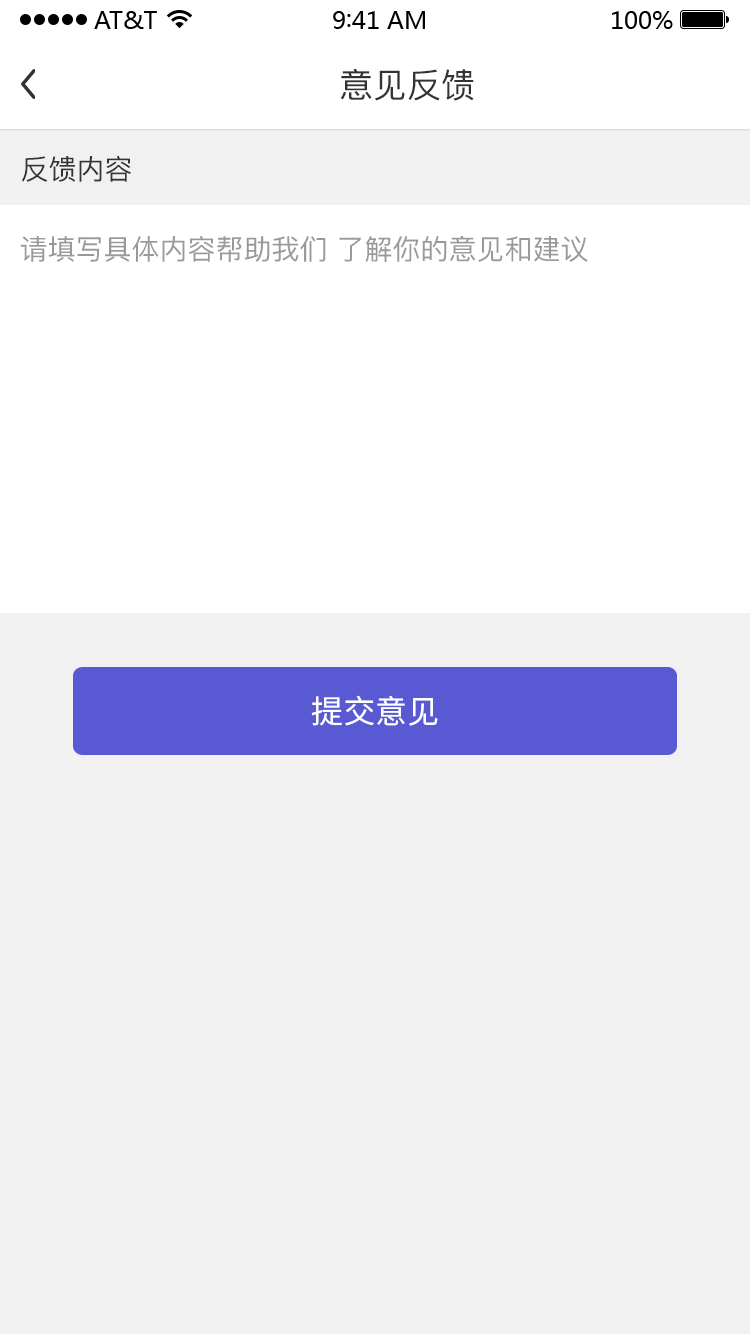
<style>
.page{position:relative;width:750px;height:1334px;background:#f1f1f1}
.page>*{position:absolute;margin:0}
.t1{font:34px "PingFang-SC-Medium";color:#333333}
.t2{font:28px "PingFang-SC-Medium";color:#333333}
.t3{font:28px "PingFang-SC-Medium";color:#999999}
.t4{font:32px "SourceHanSansCN-Regular";color:#ffffff}
</style>
<div class="page">
<p class="t1" style="left:340px;top:68px;width:134px;height:33px">意见反馈</p>
<p class="t2" style="left:22px;top:156px;width:109px;height:26px">反馈内容</p>
<p class="t3" style="left:20px;top:235px;width:568px;height:27px">请填写具体内容帮助我们 了解你的意见和建议</p>
<p class="t4" style="left:311px;top:695px;width:127px;height:31px">提交意见</p>
</div>
